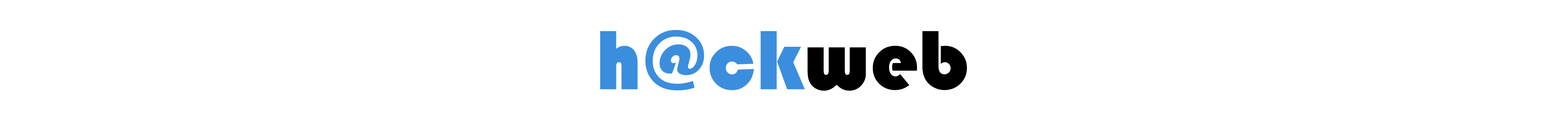
<style>
.page{position:relative;width:1568px;height:122px;background:#ffffff}
.page>*{position:absolute;margin:0}
.t1{font:87.1px "Bauhaus93";color:#3b8ede}
.t2{font:87.1px "Bauhaus93";color:#000000}
</style>
<div class="page">
<p class="t1" style="left:600px;top:30px;width:367px;height:61px">h@ck<span class="t2">web</span></p>
</div>
